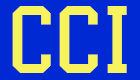
<style>
.page{position:relative;width:140px;height:80px;background:#0028d3}
.page>*{position:absolute;margin:0}
.t1{font:97.8px "College";color:#f8f45f}
</style>
<div class="page">
<p class="t1" style="left:12px;top:6px;width:115px;height:67px">CCI</p>
</div>
